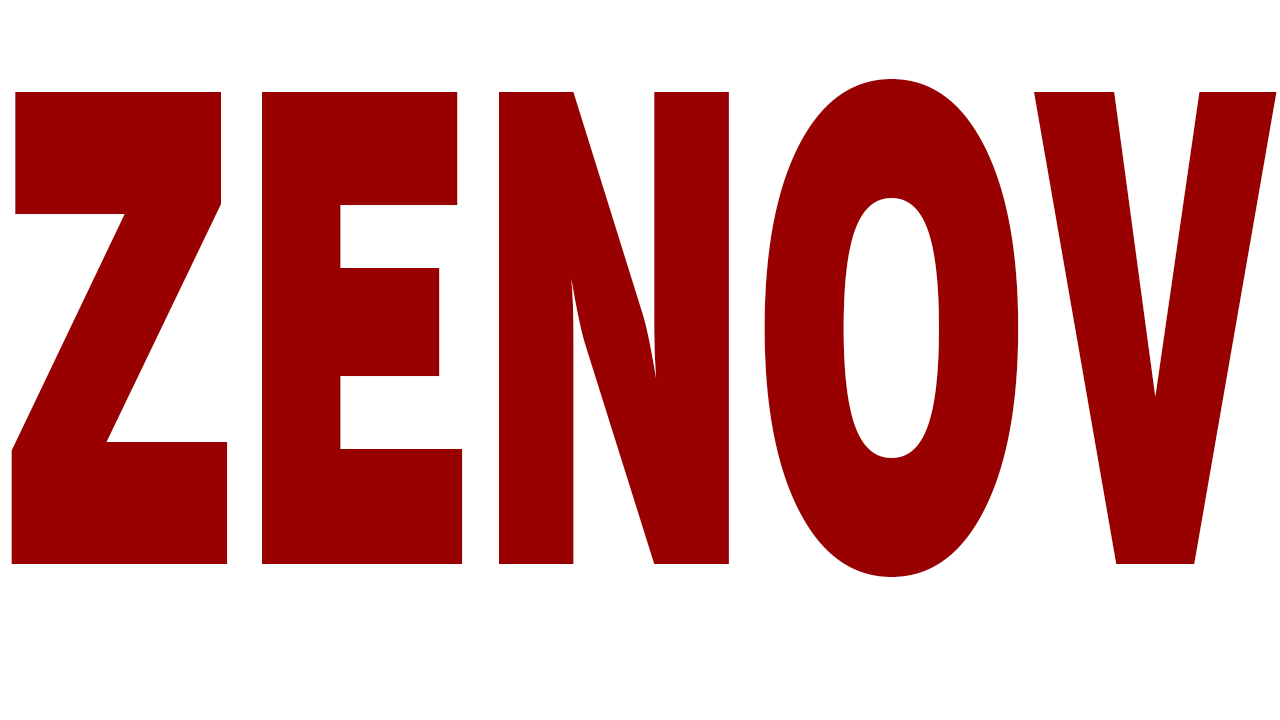
<style>
.page{position:relative;width:1280px;height:720px;background:#ffffff}
.page>*{position:absolute;margin:0}
.t1{font:656.7px "Swiss721BT-Black";color:#990000;scale:0.52 1}
</style>
<div class="page">
<p class="t1" style="left:11px;top:79px;width:1266px;height:498px">ZENOV</p>
</div>
